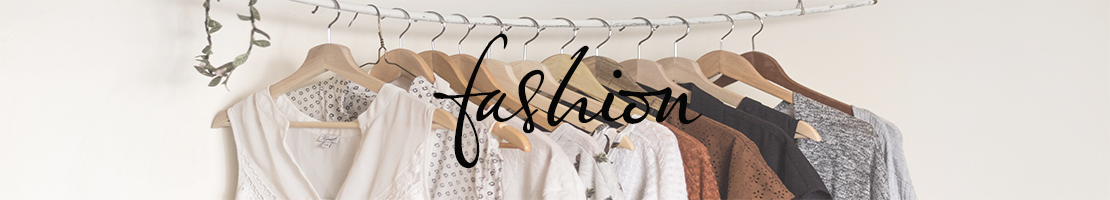
<style>
.page{position:relative;width:1110px;height:200px}
.page>*{position:absolute;margin:0}
.t1{font:120px "Olicana-Smooth";color:#060606}
</style>
<div class="page">
<p class="t1" style="left:433px;top:33px;width:269px;height:136px">fashion</p>
</div>
